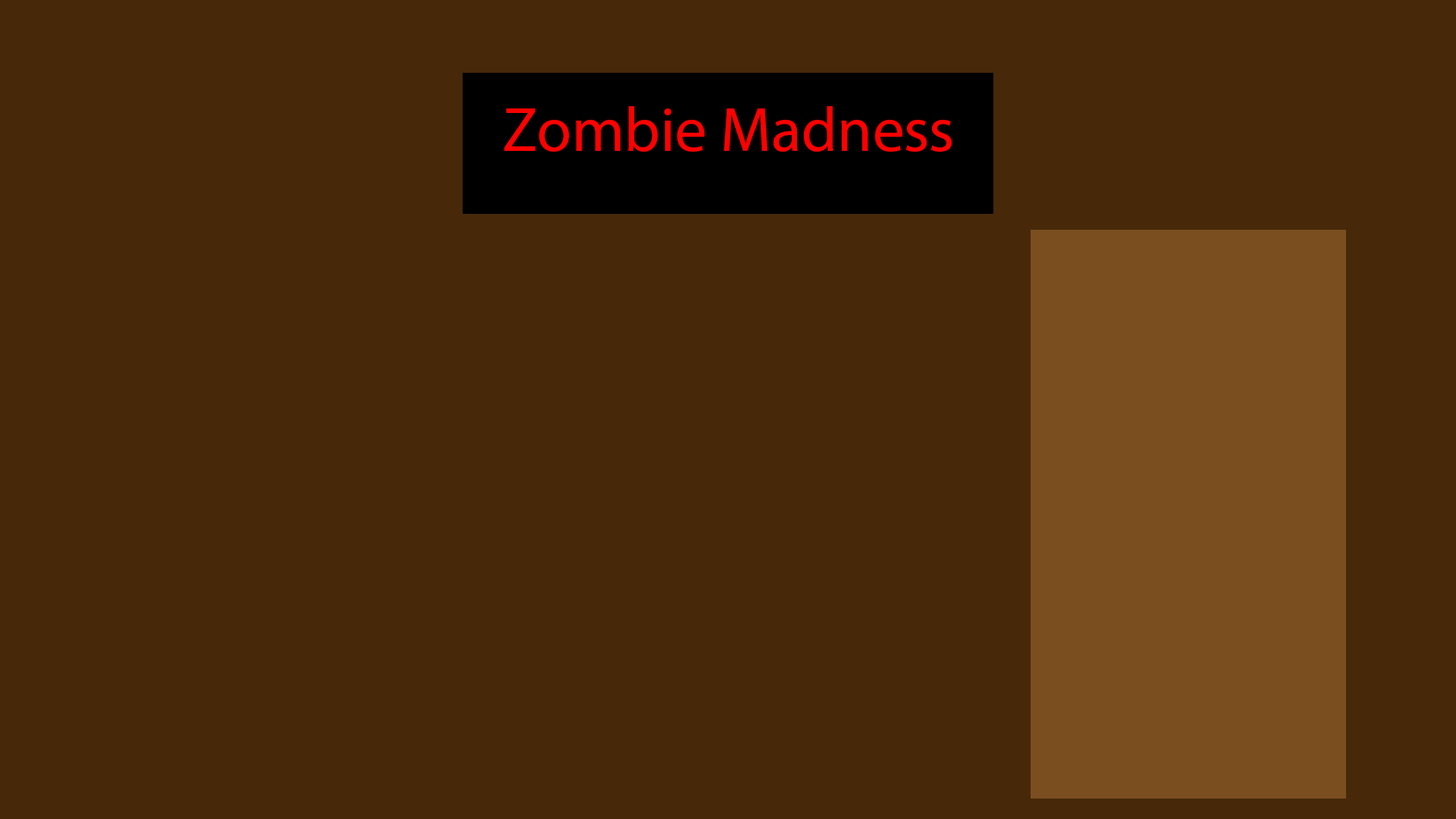
<style>
.page{position:relative;width:1456px;height:819px;background:#472909}
.page>*{position:absolute;margin:0}
.t1{font:63.2px "MyriadPro-Regular";color:#ff0000}
</style>
<div class="page">
<p class="t1" style="left:504px;top:106px;width:448px;height:46px">Zombie Madness</p>
</div>
